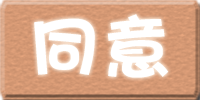
<style>
.page{position:relative;width:200px;height:100px}
.page>*{position:absolute;margin:0}
.t1{font:68.3px "DFHaiBao-W9-WINP-BF";letter-spacing:0.05em;color:#ffffff}
</style>
<div class="page">
<p class="t1" style="left:34px;top:14px;width:135px;height:64px">同意</p>
</div>
